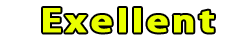
<style>
.page{position:relative;width:250px;height:39px;background:#ffffff}
.page>*{position:absolute;margin:0}
.t1{font:30.4px "AdobeGothicStd-Bold";letter-spacing:0.075em;color:#eaff00;font-weight:bold;scale:1.29 1}
</style>
<div class="page">
<p class="t1" style="left:43px;top:8px;width:171px;height:25px">Exellent</p>
</div>
